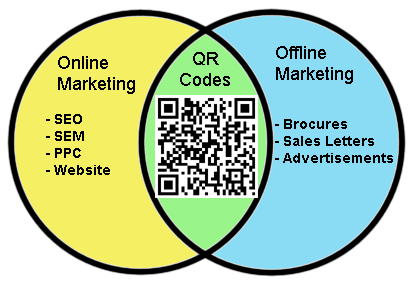
<style>
.page{position:relative;width:408px;height:285px;background:#ffffff}
.page>*{position:absolute;margin:0}
.t1{font:18px "ArialMT";color:#000000}
.t2{font:14px "Arial-BoldMT";color:#000000}
</style>
<div class="page">
<p class="t1" style="left:180px;top:52px;width:50px;height:34px;text-align:center">QR<br>Codes</p>
<p class="t1" style="left:276px;top:46px;width:77px;height:38px">Offline<br>Marketing</p>
<p class="t1" style="left:58px;top:56px;width:77px;height:38px">Online<br>Marketing</p>
<p class="t2" style="left:46px;top:114px;width:64px;height:61px">- SEO<br>- SEM<br>- PPC<br>- Website</p>
<p class="t2" style="left:275px;top:119px;width:118px;height:44px">- Brocures<br>- Sales Letters<br>- Advertisements</p>
</div>
